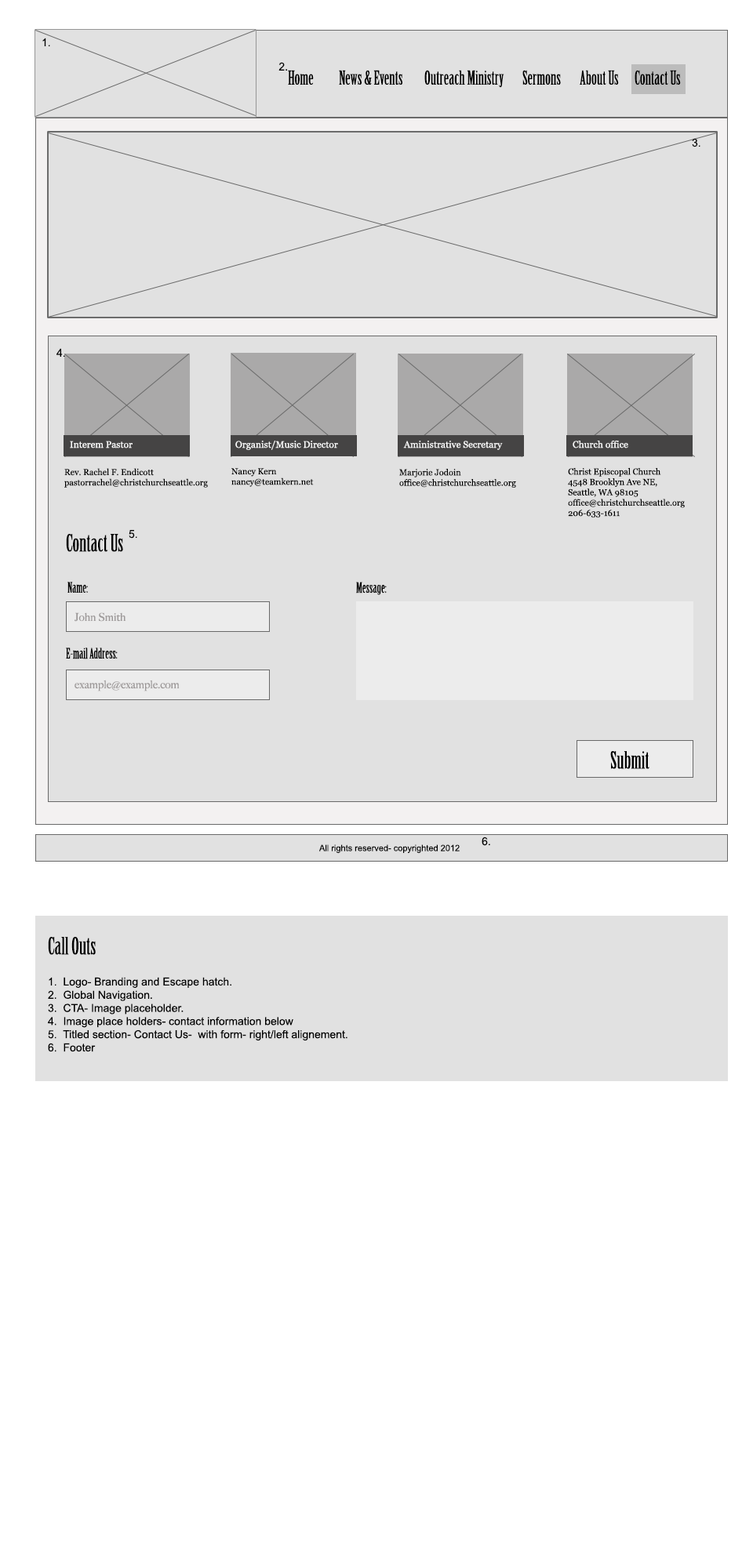
<style>
.page{position:relative;width:753px;height:1568px;background:#ffffff}
.page>*{position:absolute;margin:0}
.t1{font:11px "ArialMT";color:#000000}
.t2{font:18.8px "BirchStd";color:#000000}
.t3{font:9.4px "Georgia";color:#f9f9f9}
.t4{font:8.6px "Georgia";color:#010101}
.t5{font:8.6px "Georgia";color:#000000}
.t6{font:23.5px "BirchStd";color:#000000}
.t7{font:14.1px "BirchStd";color:#000000}
.t8{font:11px "BigCaslon-Medium";color:#9d9999}
.t9{font:8.7px "ArialMT";color:#000000}
</style>
<div class="page">
<p class="t1" style="left:42px;top:38px;width:8px;height:8px">1.</p>
<p class="t1" style="left:278px;top:62px;width:9px;height:9px">2.</p>
<p class="t2" style="left:288px;top:70px;width:26px;height:15px">Home</p>
<p class="t2" style="left:339px;top:70px;width:63px;height:15px">News &amp; Events</p>
<p class="t2" style="left:424px;top:70px;width:80px;height:18px">Outreach Ministry</p>
<p class="t2" style="left:522px;top:70px;width:39px;height:15px">Sermons</p>
<p class="t2" style="left:579px;top:70px;width:40px;height:15px">About Us</p>
<p class="t2" style="left:634px;top:70px;width:47px;height:15px">Contact Us</p>
<p class="t1" style="left:691px;top:138px;width:9px;height:9px">3.</p>
<p class="t1" style="left:56px;top:348px;width:9px;height:9px">4.</p>
<p class="t3" style="left:70px;top:441px;width:62px;height:7px">Interem Pastor</p>
<p class="t3" style="left:235px;top:441px;width:103px;height:9px">Organist/Music Director</p>
<p class="t3" style="left:403px;top:441px;width:100px;height:9px">Aministrative Secretary</p>
<p class="t3" style="left:572px;top:441px;width:56px;height:7px">Church office</p>
<p class="t4" style="left:64px;top:468px;width:144px;height:20px">Rev. Rachel F. Endicott<br>pastorrachel@christchurchseattle.org</p>
<p class="t5" style="left:231px;top:468px;width:83px;height:19px">Nancy Kern<br>nancy@teamkern.net</p>
<p class="t5" style="left:399px;top:468px;width:117px;height:20px">Marjorie Jodoin<br>office@christchurchseattle.org</p>
<p class="t5" style="left:568px;top:467px;width:116px;height:51px">Christ Episcopal Church<br>4548 Brooklyn Ave NE,<br>Seattle, WA 98105<br>office@christchurchseattle.org<br>206-633-1611</p>
<p class="t6" style="left:66px;top:534px;width:57px;height:18px">Contact Us</p>
<p class="t1" style="left:129px;top:530px;width:8px;height:9px">5.</p>
<p class="t7" style="left:67px;top:582px;width:21px;height:11px">Name:</p>
<p class="t7" style="left:356px;top:582px;width:31px;height:13px">Message:</p>
<p class="t8" style="left:74px;top:612px;width:52px;height:10px">John Smith</p>
<p class="t7" style="left:66px;top:648px;width:52px;height:11px">E-mail Address:</p>
<p class="t8" style="left:74px;top:680px;width:106px;height:11px">example@example.com</p>
<p class="t6" style="left:610px;top:751px;width:39px;height:18px">Submit</p>
<p class="t9" style="left:319px;top:844px;width:140px;height:9px">All rights reserved- copyrighted 2012</p>
<p class="t1" style="left:481px;top:837px;width:9px;height:9px">6.</p>
<p class="t6" style="left:48px;top:937px;width:48px;height:18px">Call Outs</p>
<p class="t1" style="left:48px;top:977px;width:299px;height:75px">1.  Logo- Branding and Escape hatch.<br>2.  Global Navigation.<br>3.  CTA- Image placeholder.<br>4.  Image place holders- contact information below<br>5.  Titled section- Contact Us-  with form- right/left alignement.<br>6.  Footer</p>
</div>
